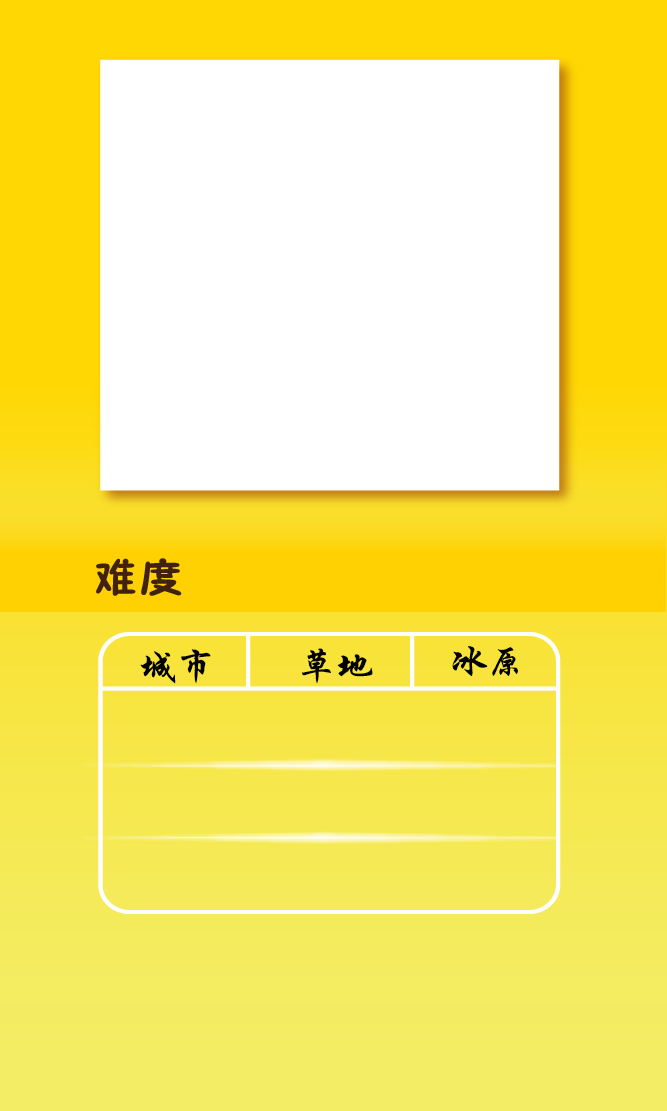
<style>
.page{position:relative;width:667px;height:1111px;background:#ffffff}
.page>*{position:absolute;margin:0}
.t1{font:35.2px "STXingkai";color:#000000;scale:1.06 1}
</style>
<div class="page">
<p class="t1" style="left:140px;top:649px;width:71px;height:35px">城市</p>
<p class="t1" style="left:302px;top:648px;width:71px;height:36px">草地</p>
<p class="t1" style="left:452px;top:646px;width:66px;height:30px">冰原</p>
</div>
